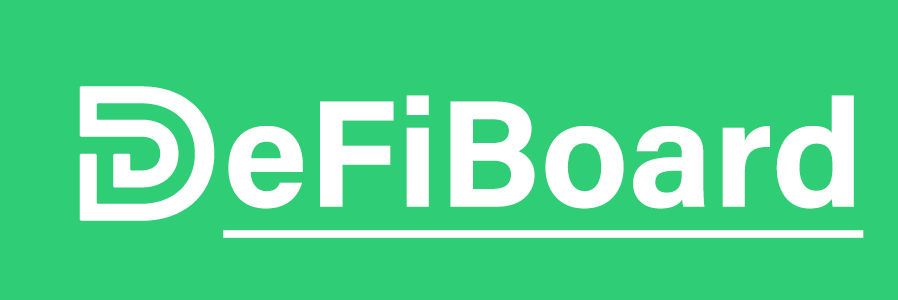
<style>
.page{position:relative;width:898px;height:300px;background:#2fcd76}
.page>*{position:absolute;margin:0}
.t1{font:152px "AcuminConcept-Bold";color:#ffffff;text-decoration:underline}
</style>
<div class="page">
<p class="t1" style="left:223px;top:95px;width:641px;height:143px">eFiBoard</p>
</div>
